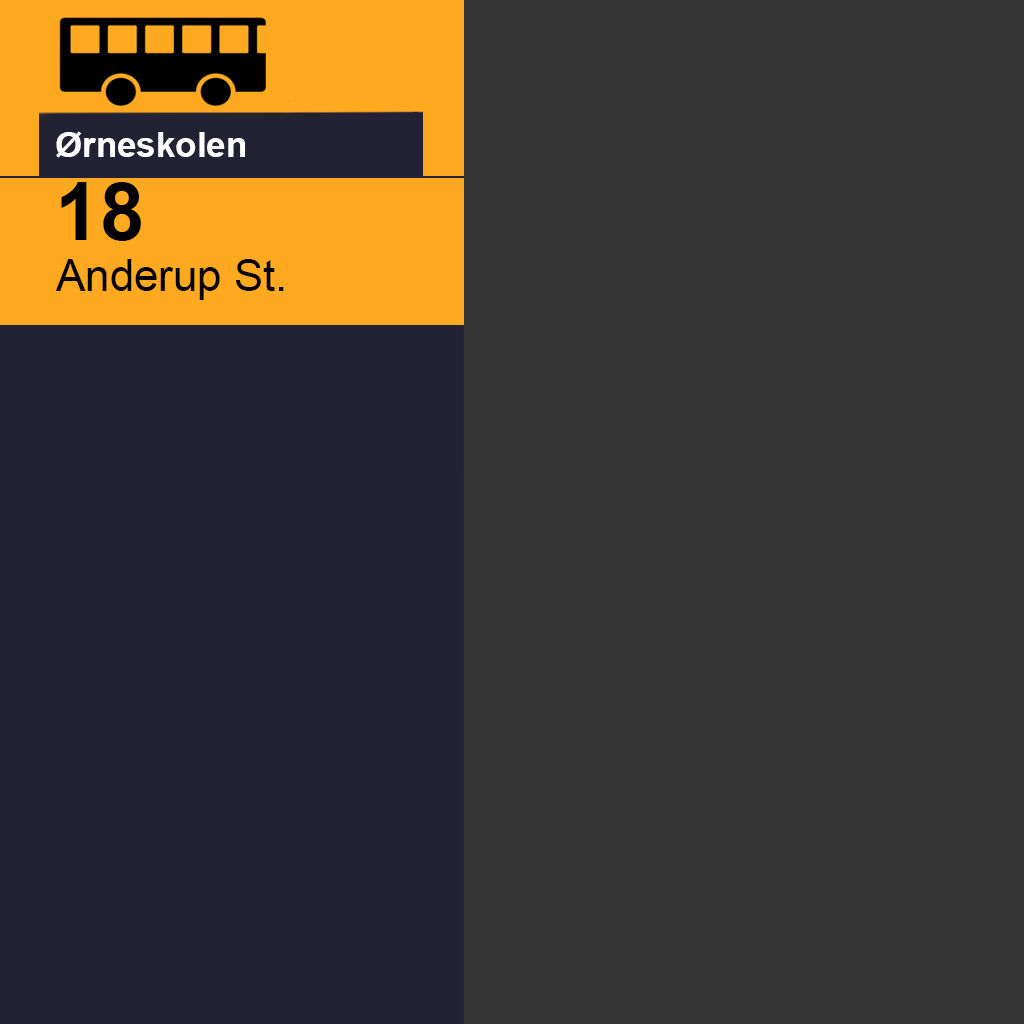
<style>
.page{position:relative;width:1024px;height:1024px;background:#333333}
.page>*{position:absolute;margin:0}
.t1{font:35px "Arial-BoldMT";color:#ffffff}
.t2{font:80px "Arial-BoldMT";color:#000000}
.t3{font:43.8px "ArialMT";color:#000000}
</style>
<div class="page">
<p class="t1" style="left:56px;top:131px;width:189px;height:27px">Ørneskolen</p>
<p class="t2" style="left:61px;top:182px;width:80px;height:59px">18</p>
<p class="t3" style="left:55px;top:259px;width:229px;height:41px">Anderup St.</p>
</div>
